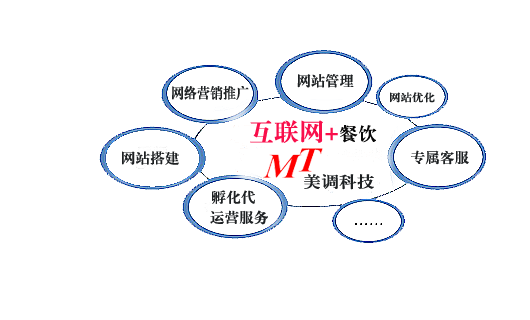
<style>
.page{position:relative;width:530px;height:320px;background:#ffffff}
.page>*{position:absolute;margin:0}
.t1{font:14.3px "FZXBSJW--GB1-0";letter-spacing:0.05em;color:#1e2123;scale:0.95 1}
.t2{font:14.5px "FZXBSJW--GB1-0";letter-spacing:0.05em;color:#1e2123;scale:0.86 1}
.t3{font:10.4px "FZXBSJW--GB1-0";letter-spacing:0.05em;color:#1e2123;scale:1.05 1}
.t4{font:24px "FZXBSJW--GB1-0";letter-spacing:0.05em;color:#f90f4b}
.t5{font:18px "FZXBSJW--GB1-0";letter-spacing:0.05em;color:#080808}
.t6{font:14px "FZXBSJW--GB1-0";letter-spacing:0.05em;color:#1e2123}
.t7{font:15.6px "FZXBSJW--GB1-0";letter-spacing:0.05em;color:#1e2123;scale:1.1 1}
</style>
<div class="page">
<p class="t1" style="left:297px;top:74px;width:57px;height:14px">网站管理</p>
<p class="t2" style="left:172px;top:86px;width:77px;height:14px">网络营销推广</p>
<p class="t3" style="left:390px;top:92px;width:45px;height:11px">网站优化</p>
<p class="t4" style="left:250px;top:120px;width:127px;height:23px">互联网+<span class="t5">餐饮</span></p>
<p class="t6" style="left:411px;top:150px;width:58px;height:15px">专属客服</p>
<p class="t6" style="left:122px;top:151px;width:57px;height:14px">网站搭建</p>
<p class="t7" style="left:304px;top:174px;width:70px;height:16px">美调科技</p>
<p class="t6" style="left:212px;top:190px;width:43px;height:14px">孵化代</p>
<p class="t6" style="left:210px;top:210px;width:58px;height:15px">运营服务</p>
</div>
